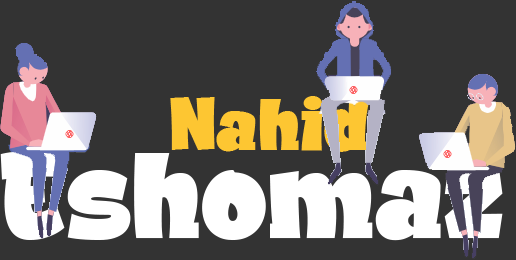
<style>
.page{position:relative;width:516px;height:260px;background:#333333}
.page>*{position:absolute;margin:0}
.t1{font:75px "Helsky-Regular";color:#fdc632}
.t2{font:125px "Helsky-Regular";color:#ffffff}
</style>
<div class="page">
<p class="t1" style="left:170px;top:96px;width:200px;height:56px">Nahid</p>
<p class="t2" style="left:0px;top:150px;width:503px;height:91px">Eshomaz</p>
</div>
